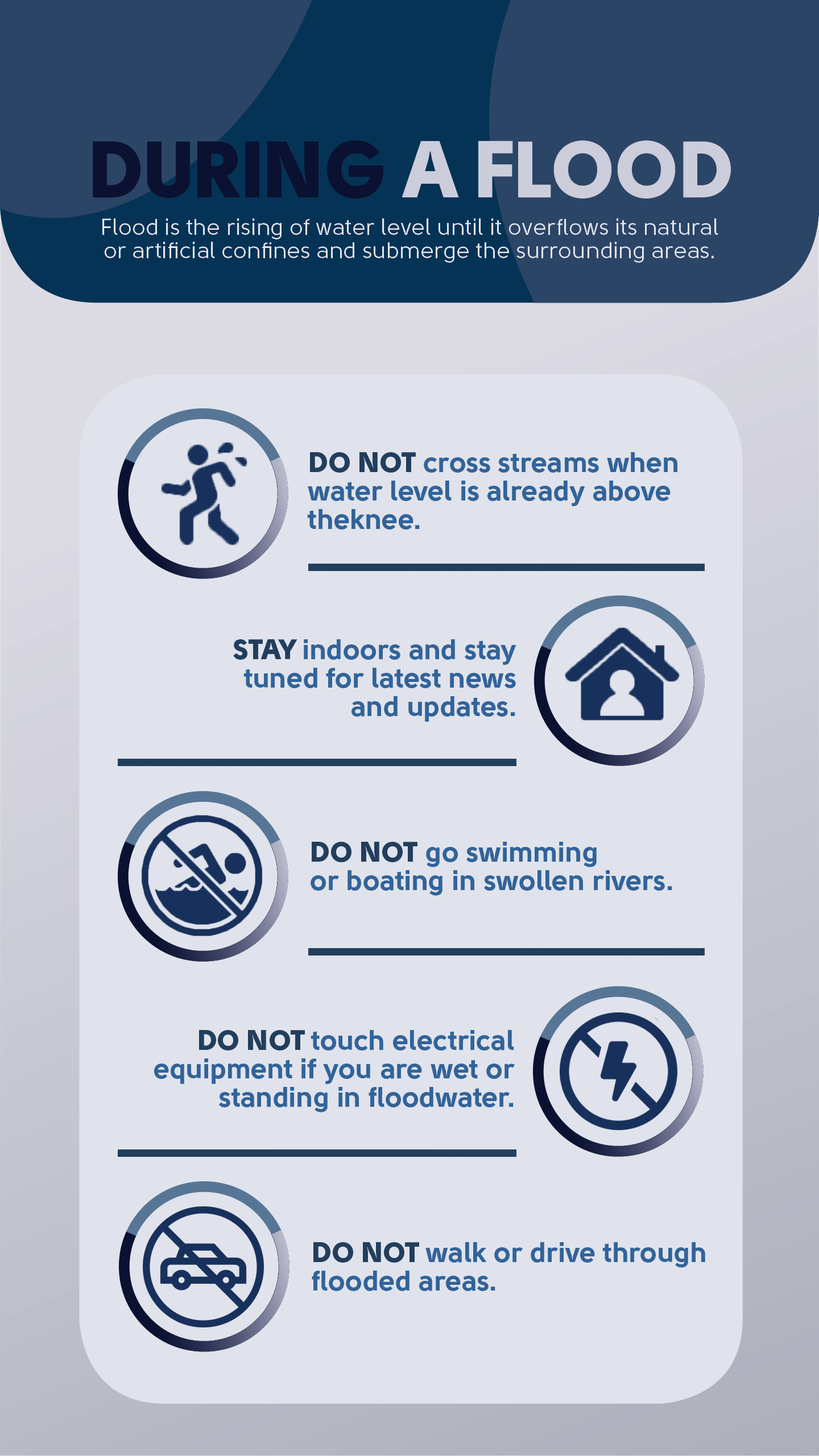
<style>
.page{position:relative;width:819px;height:1456px;background:#e0e3ec}
.page>*{position:absolute;margin:0}
.t1{font:28.4px/28.4px "Solomon-Sans-Bold";color:#326399}
.t2{font:28.4px/28.4px "Solomon-Sans-Black";color:#223e5d}
</style>
<div class="page">
<p class="t1" style="left:307px;top:452px;width:370px;height:77px"><span class="t2">DO NOT </span>cross streams when<br>water level is already above<br>theknee.</p>
<p class="t1" style="left:233px;top:639px;width:283px;height:83px;text-align:right"><span class="t2">STAY </span>indoors and stay<br>tuned for latest news<br>and updates.</p>
<p class="t1" style="left:311px;top:842px;width:361px;height:54px"><span class="t2">DO NOT </span>go swimming<br>or boating in swollen rivers.</p>
<p class="t1" style="left:154px;top:1030px;width:361px;height:82px;text-align:right"><span class="t2">DO NOT </span>touch electrical<br>equipment if you are wet or<br>standing in floodwater.</p>
<p class="t1" style="left:312px;top:1242px;width:393px;height:49px"><span class="t2">DO NOT </span>walk or drive through<br>flooded areas.</p>
</div>
